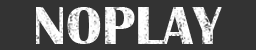
<style>
.page{position:relative;width:256px;height:50px;background:#333333}
.page>*{position:absolute;margin:0}
.t1{font:55.4px "BritannicBold";color:#ffffff}
</style>
<div class="page">
<p class="t1" style="left:36px;top:7px;width:186px;height:37px">NOPLAY</p>
</div>
